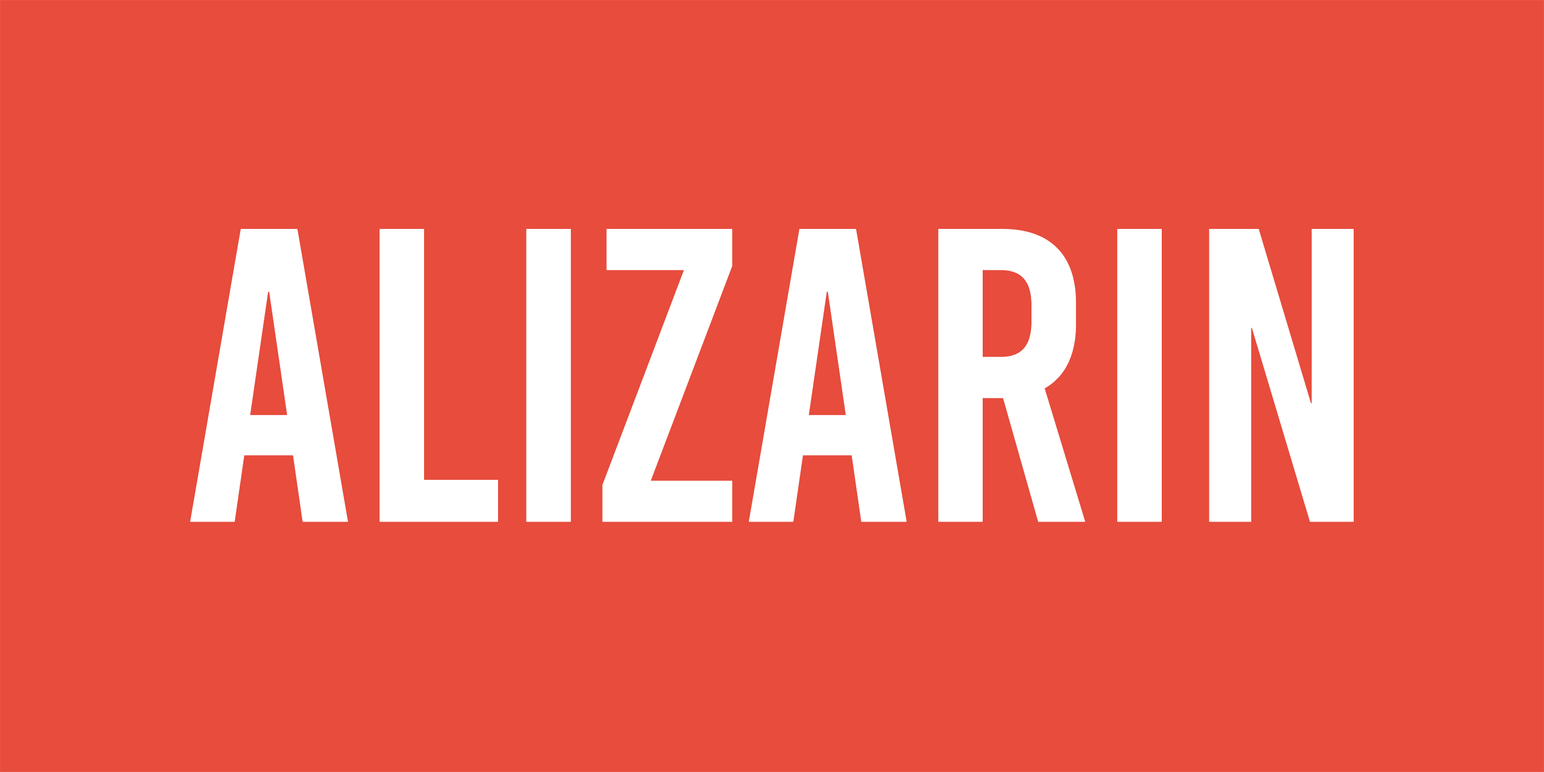
<style>
.page{position:relative;width:1544px;height:772px;background:#e74c3c}
.page>*{position:absolute;margin:0}
.t1{font:418.2px "BebasKai";color:#ffffff}
</style>
<div class="page">
<p class="t1" style="left:190px;top:229px;width:1164px;height:293px">alizarin</p>
</div>
